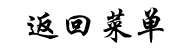
<style>
.page{position:relative;width:186px;height:48px;background:#ffffff}
.page>*{position:absolute;margin:0}
.t1{font:36px "STXingkai";color:#000000}
</style>
<div class="page">
<p class="t1" style="left:27px;top:7px;width:137px;height:36px">返回菜单</p>
</div>
